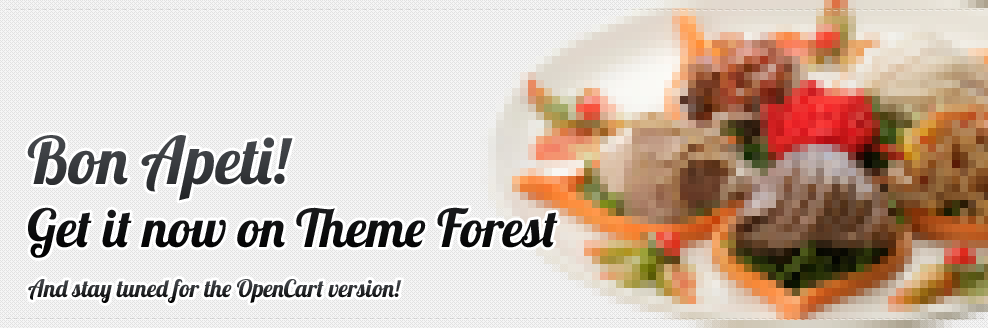
<style>
.page{position:relative;width:988px;height:328px;background:#f5f5f5}
.page>*{position:absolute;margin:0}
.t1{font:52.3px "Lobster"}
.t2{font:65.3px "Lobster"}
.t3{font:23.9px "Lobster";color:#26282b}
</style>
<div class="page">
<p class="t1" style="left:27px;top:135px;width:531px;height:123px"><span class="t2">Bon Apeti!<br></span>Get it now on Theme Forest</p>
<p class="t3" style="left:28px;top:279px;width:374px;height:24px">And stay tuned for the OpenCart version!</p>
</div>
